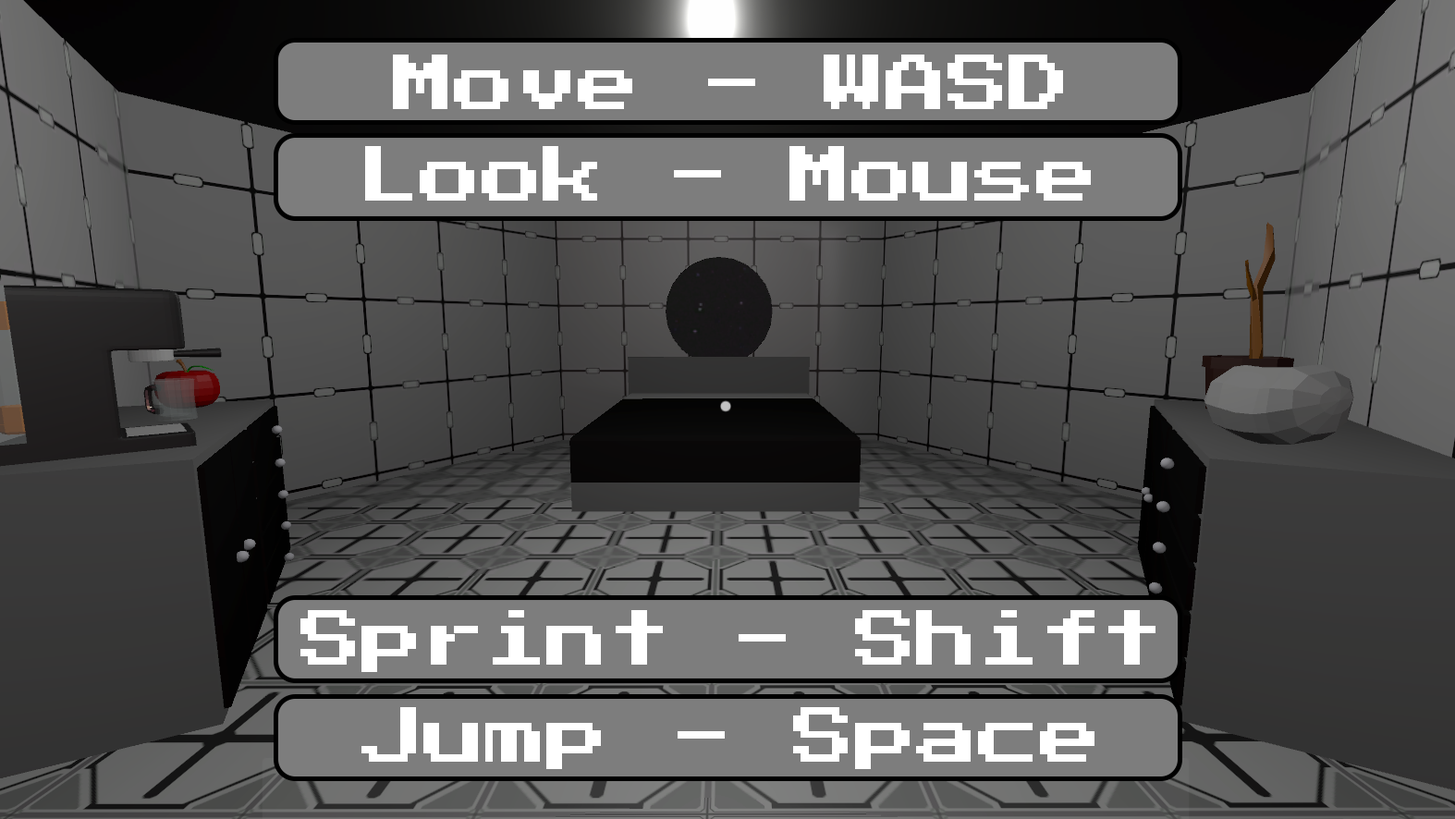
<style>
.page{position:relative;width:1455px;height:819px}
.page>*{position:absolute;margin:0}
.t1{font:61.6px "PressStart2P-Regular";color:#ffffff}
</style>
<div class="page">
<p class="t1" style="left:393px;top:55px;width:670px;height:54px">Move - WASD</p>
<p class="t1" style="left:365px;top:146px;width:726px;height:55px">Look - Mouse</p>
<p class="t1" style="left:301px;top:610px;width:855px;height:62px">Sprint - Shift</p>
<p class="t1" style="left:362px;top:707px;width:733px;height:62px">Jump - Space</p>
</div>
